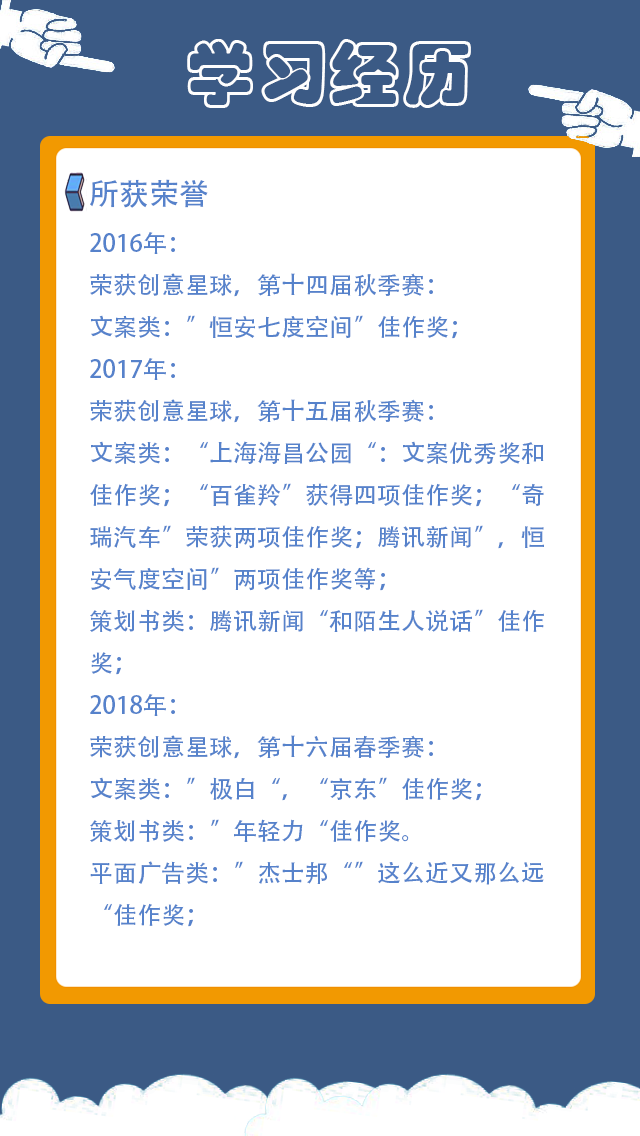
<style>
.page{position:relative;width:640px;height:1136px;background:#ffffff}
.page>*{position:absolute;margin:0}
.t1{font:72px "STCaiyun";color:#fefefe}
.t2{font:24px "AdobeHeitiStd-Regular";color:#5682cb}
.t3{font:30px "AdobeHeitiStd-Regular";color:#5682cb}
</style>
<div class="page">
<p class="t1" style="left:187px;top:39px;width:284px;height:69px">学习经历</p>
<p class="t2" style="left:90px;top:179px;width:454px;height:748px"><span class="t3">所获荣誉<br></span>2016年：<br>荣获创意星球，第十四届秋季赛：<br>文案类：”恒安七度空间”佳作奖；<br>2017年：<br>荣获创意星球，第十五届秋季赛：<br>文案类：“上海海昌公园“：文案优秀奖和佳作奖；“百雀羚”获得四项佳作奖；“奇瑞汽车”荣获两项佳作奖；腾讯新闻”，恒安气度空间”两项佳作奖等；<br>策划书类：腾讯新闻“和陌生人说话”佳作奖；<br>2018年：<br>荣获创意星球，第十六届春季赛：<br>文案类：”极白“，“京东”佳作奖；<br>策划书类：”年轻力“佳作奖。<br>平面广告类：”杰士邦“”这么近又那么远“佳作奖；</p>
</div>
